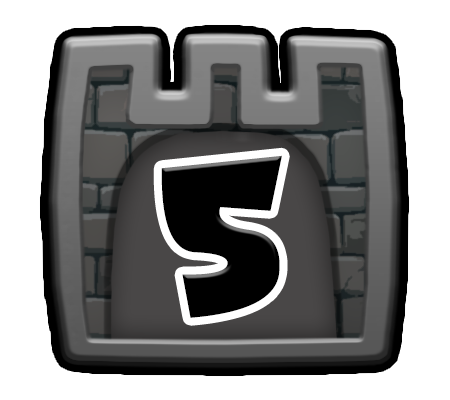
<style>
.page{position:relative;width:450px;height:400px;background:#ffffff}
.page>*{position:absolute;margin:0}
.t1{font:195.3px "Funhouse";color:#000000}
</style>
<div class="page">
<p class="t1" style="left:161px;top:155px;width:121px;height:163px">5</p>
</div>
